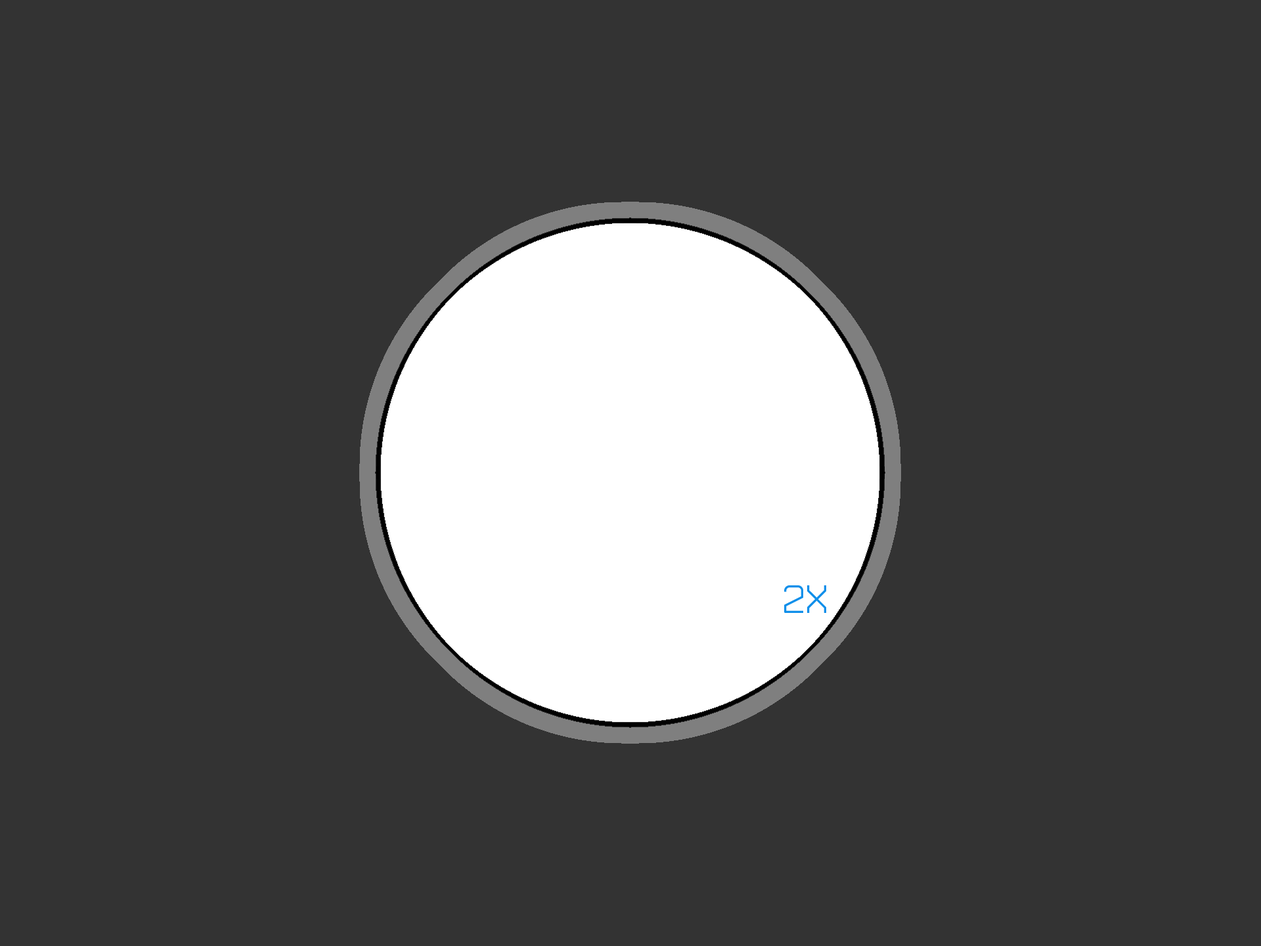
<style>
.page{position:relative;width:1261px;height:946px;background:#333333}
.page>*{position:absolute;margin:0}
.t1{font:39.4px "Arame-Thin";color:#108fea}
</style>
<div class="page">
<p class="t1" style="left:784px;top:585px;width:42px;height:28px">2x</p>
</div>
